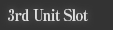
<style>
.page{position:relative;width:113px;height:30px;background:#333333}
.page>*{position:absolute;margin:0}
.t1{font:16px "RyuminPro-ExBold";letter-spacing:-0.04em;color:#dfdfdf;scale:0.9 1}
</style>
<div class="page">
<p class="t1" style="left:8px;top:8px;width:80px;height:13px">3rd Unit Slot</p>
</div>
